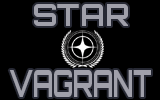
<style>
.page{position:relative;width:160px;height:100px;background:#000000}
.page>*{position:absolute;margin:0}
.t1{font:30px "Orbitron-Bold";color:#a0a0aa}
.t2{font:37.4px "Orbitron-Bold";color:#a0a0aa;scale:0.64 1}
</style>
<div class="page">
<p class="t1" style="left:34px;top:4px;width:94px;height:22px">STAR</p>
<p class="t2" style="left:9px;top:70px;width:142px;height:27px">VAGRANT</p>
</div>
